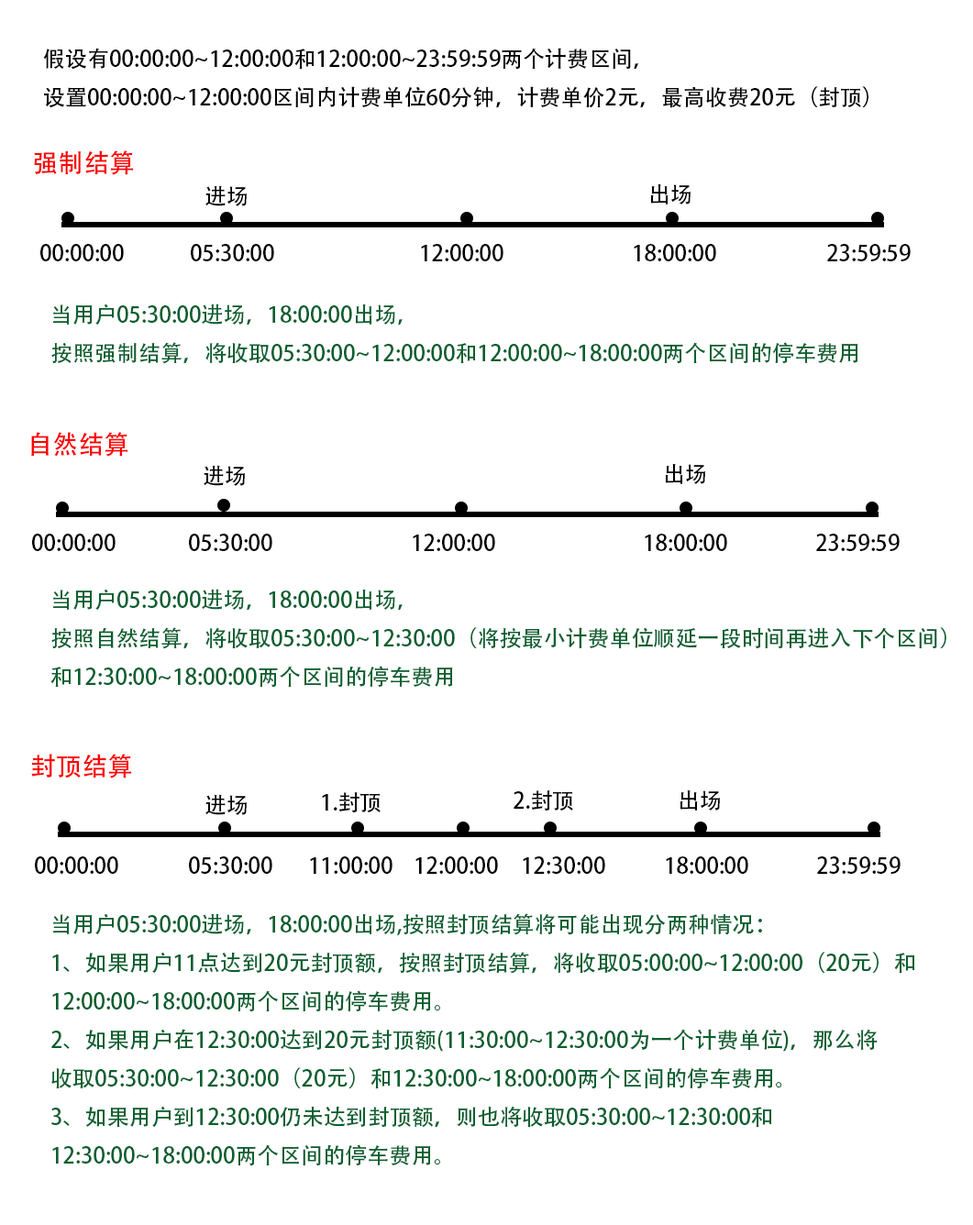
<style>
.page{position:relative;width:973px;height:1225px;background:#ffffff}
.page>*{position:absolute;margin:0}
.t1{font:22px "AdobeHeitiStd-Regular";color:#000000}
.t2{font:25.7px "AdobeHeitiStd-Regular";color:#fe0000}
.t3{font:22px "AdobeHeitiStd-Regular";color:#065f2e}
.t4{font:25.7px "AdobeHeitiStd-Regular";color:#ff0000}
</style>
<div class="page">
<p class="t1" style="left:43px;top:48px;width:826px;height:60px">假设有00:00:00~12:00:00和12:00:00~23:59:59两个计费区间，<br>设置00:00:00~12:00:00区间内计费单位60分钟，计费单价2元，最高收费20元（封顶）</p>
<p class="t2" style="left:34px;top:150px;width:100px;height:25px">强制结算</p>
<p class="t1" style="left:205px;top:185px;width:42px;height:21px">进场</p>
<p class="t1" style="left:650px;top:184px;width:41px;height:21px">出场</p>
<p class="t1" style="left:40px;top:244px;width:84px;height:17px">00:00:00</p>
<p class="t1" style="left:191px;top:244px;width:83px;height:17px">05:30:00</p>
<p class="t1" style="left:421px;top:244px;width:83px;height:17px">12:00:00</p>
<p class="t1" style="left:634px;top:244px;width:82px;height:17px">18:00:00</p>
<p class="t1" style="left:827px;top:244px;width:84px;height:17px">23:59:59</p>
<p class="t3" style="left:51px;top:304px;width:807px;height:60px">当用户05:30:00进场，18:00:00出场，<br>按照强制结算，将收取05:30:00~12:00:00和12:00:00~18:00:00两个区间的停车费用</p>
<p class="t4" style="left:31px;top:432px;width:97px;height:25px">自然结算</p>
<p class="t1" style="left:204px;top:465px;width:41px;height:21px">进场</p>
<p class="t1" style="left:665px;top:464px;width:40px;height:20px">出场</p>
<p class="t1" style="left:32px;top:534px;width:84px;height:17px">00:00:00</p>
<p class="t1" style="left:189px;top:534px;width:83px;height:17px">05:30:00</p>
<p class="t1" style="left:413px;top:534px;width:82px;height:17px">12:00:00</p>
<p class="t1" style="left:645px;top:534px;width:82px;height:17px">18:00:00</p>
<p class="t1" style="left:816px;top:534px;width:84px;height:17px">23:59:59</p>
<p class="t3" style="left:50px;top:589px;width:897px;height:99px">当用户05:30:00进场，18:00:00出场，<br>按照自然结算，将收取05:30:00~12:30:00（将按最小计费单位顺延一段时间再进入下个区间）<br>和12:30:00~18:00:00两个区间的停车费用</p>
<p class="t2" style="left:31px;top:754px;width:101px;height:25px">封顶结算</p>
<p class="t1" style="left:205px;top:794px;width:42px;height:21px">进场</p>
<p class="t1" style="left:322px;top:792px;width:59px;height:21px">1.封顶</p>
<p class="t1" style="left:514px;top:791px;width:59px;height:20px">2.封顶</p>
<p class="t1" style="left:680px;top:791px;width:40px;height:20px">出场</p>
<p class="t1" style="left:35px;top:857px;width:83px;height:17px">00:00:00</p>
<p class="t1" style="left:189px;top:857px;width:83px;height:17px">05:30:00</p>
<p class="t1" style="left:310px;top:857px;width:83px;height:17px">11:00:00</p>
<p class="t1" style="left:415px;top:857px;width:83px;height:17px">12:00:00</p>
<p class="t1" style="left:523px;top:857px;width:82px;height:17px">12:30:00</p>
<p class="t1" style="left:666px;top:857px;width:82px;height:17px">18:00:00</p>
<p class="t1" style="left:817px;top:857px;width:84px;height:17px">23:59:59</p>
<p class="t3" style="left:51px;top:914px;width:864px;height:253px">当用户05:30:00进场，18:00:00出场,按照封顶结算将可能出现分两种情况：<br>1、如果用户11点达到20元封顶额，按照封顶结算，将收取05:00:00~12:00:00（20元）和<br>12:00:00~18:00:00两个区间的停车费用。<br>2、如果用户在12:30:00达到20元封顶额(11:30:00~12:30:00为一个计费单位)，那么将<br>收取05:30:00~12:30:00（20元）和12:30:00~18:00:00两个区间的停车费用。<br>3、如果用户到12:30:00仍未达到封顶额，则也将收取05:30:00~12:30:00和<br>12:30:00~18:00:00两个区间的停车费用。</p>
</div>
